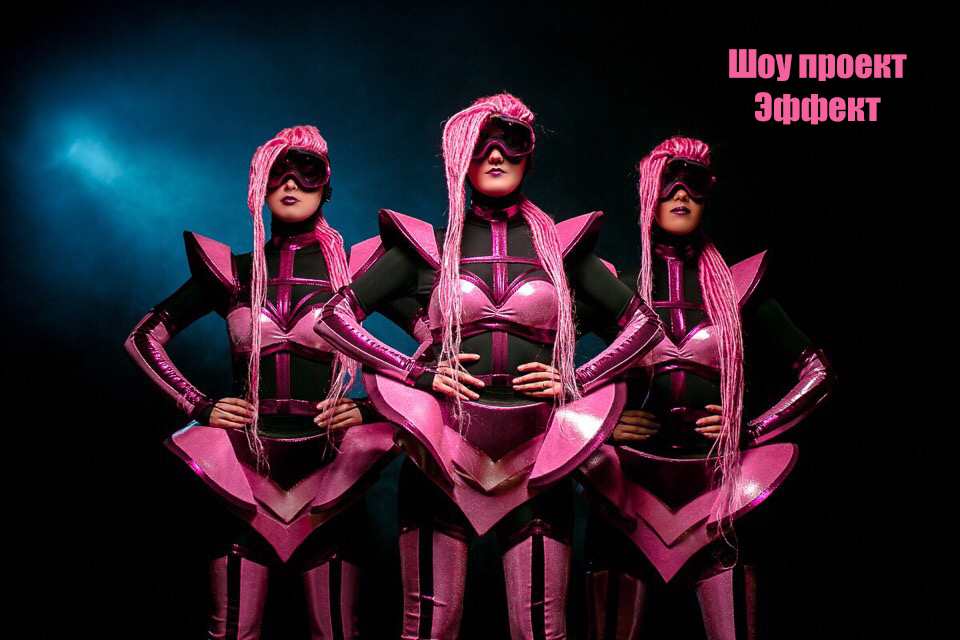
<style>
.page{position:relative;width:960px;height:640px;background:#010101}
.page>*{position:absolute;margin:0}
.t1{font:36px "Impact";color:#f5619d}
</style>
<div class="page">
<p class="t1" style="left:729px;top:49px;width:178px;height:76px;text-align:center">Шоу проект<br>Эффект</p>
</div>
